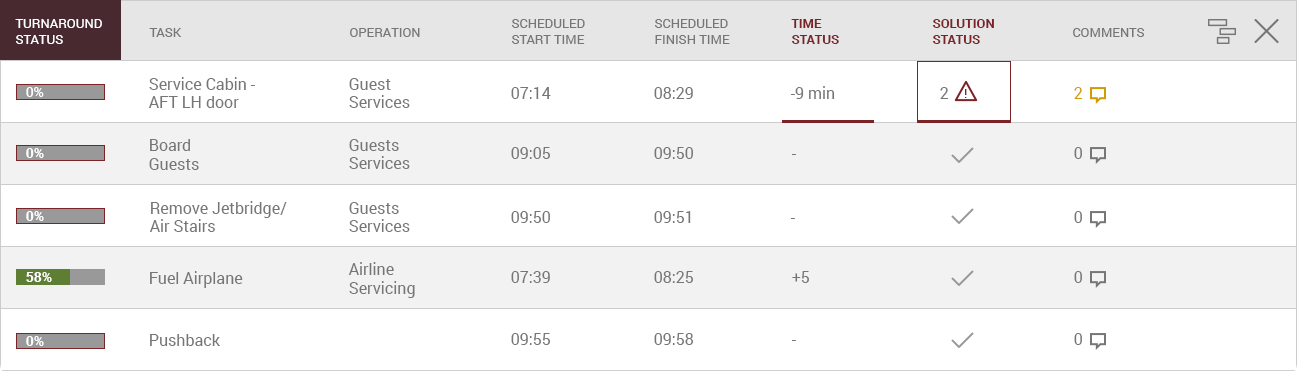
<style>
.page{position:relative;width:1297px;height:371px;background:#ffffff}
.page>*{position:absolute;margin:0}
.t1{font:13px "Roboto-Regular";color:#ffffff;text-transform:uppercase}
.t2{font:13px "Roboto-Regular";color:#767676;text-transform:uppercase}
.t3{font:13px "Roboto-Bold";color:#7b2326;text-transform:uppercase}
.t4{font:16px/18px "Roboto-Regular";color:#767676}
.t5{font:14px "Roboto-Medium";color:#fefefe}
.t6{font:16px "Roboto-Regular";color:#767676}
.t7{font:13.3px "Roboto-Regular";color:#7b2326}
.t8{font:16px "Roboto-Regular";color:#d09c04}
.t9{font:14px "Roboto-Bold";color:#fefefe}
</style>
<div class="page">
<p class="t1" style="left:15px;top:19px;width:87px;height:25px">Turnaround<br>status</p>
<p class="t2" style="left:149px;top:28px;width:33px;height:9px">Task</p>
<p class="t2" style="left:350px;top:28px;width:70px;height:9px">Operation</p>
<p class="t2" style="left:512px;top:19px;width:73px;height:25px">Scheduled<br>Start Time</p>
<p class="t2" style="left:655px;top:19px;width:75px;height:25px">Scheduled<br>Finish Time</p>
<p class="t3" style="left:791px;top:19px;width:48px;height:25px">Time<br>status</p>
<p class="t3" style="left:933px;top:19px;width:61px;height:25px">Solution<br>Status</p>
<p class="t2" style="left:1073px;top:28px;width:71px;height:9px">Comments</p>
<p class="t4" style="left:148px;top:77px;width:107px;height:31px">Service Cabin -<br>AFT LH door</p>
<p class="t4" style="left:349px;top:78px;width:61px;height:30px">Guest<br>Services</p>
<p class="t5" style="left:26px;top:87px;width:18px;height:10px">0%</p>
<p class="t6" style="left:511px;top:87px;width:40px;height:12px">07:14</p>
<p class="t6" style="left:654px;top:87px;width:39px;height:12px">08:29</p>
<p class="t6" style="left:790px;top:86px;width:45px;height:13px">-9 min</p>
<p class="t6" style="left:940px;top:87px;width:9px;height:12px">2</p>
<p class="t7" style="left:965px;top:89px;width:2px;height:9px">!</p>
<p class="t8" style="left:1074px;top:87px;width:9px;height:12px">2</p>
<p class="t9" style="left:26px;top:148px;width:18px;height:10px">0%</p>
<p class="t6" style="left:149px;top:139px;width:50px;height:31px">Board<br>Guests</p>
<p class="t4" style="left:349px;top:139px;width:61px;height:30px">Guests<br>Services</p>
<p class="t6" style="left:511px;top:147px;width:39px;height:12px">09:05</p>
<p class="t6" style="left:654px;top:147px;width:39px;height:12px">09:50</p>
<p class="t6" style="left:1074px;top:147px;width:8px;height:12px">0</p>
<p class="t6" style="left:791px;top:154px;width:5px;height:1px">-</p>
<p class="t4" style="left:149px;top:201px;width:138px;height:31px">Remove Jetbridge/<br>Air Stairs</p>
<p class="t4" style="left:349px;top:202px;width:61px;height:30px">Guests<br>Services</p>
<p class="t9" style="left:26px;top:211px;width:18px;height:10px">0%</p>
<p class="t6" style="left:511px;top:211px;width:39px;height:12px">09:50</p>
<p class="t6" style="left:654px;top:211px;width:37px;height:12px">09:51</p>
<p class="t6" style="left:790px;top:218px;width:5px;height:1px">-</p>
<p class="t6" style="left:1074px;top:211px;width:8px;height:12px">0</p>
<p class="t6" style="left:348px;top:262px;width:67px;height:36px">Airline<br>Servicing</p>
<p class="t9" style="left:26px;top:272px;width:26px;height:10px">58%</p>
<p class="t6" style="left:150px;top:271px;width:93px;height:17px">Fuel Airplane</p>
<p class="t6" style="left:511px;top:271px;width:39px;height:12px">07:39</p>
<p class="t6" style="left:654px;top:271px;width:39px;height:12px">08:25</p>
<p class="t6" style="left:792px;top:271px;width:17px;height:12px">+5</p>
<p class="t6" style="left:1074px;top:271px;width:8px;height:12px">0</p>
<p class="t9" style="left:26px;top:336px;width:18px;height:10px">0%</p>
<p class="t6" style="left:150px;top:334px;width:70px;height:12px">Pushback</p>
<p class="t6" style="left:511px;top:333px;width:39px;height:12px">09:55</p>
<p class="t6" style="left:654px;top:333px;width:40px;height:12px">09:58</p>
<p class="t6" style="left:791px;top:340px;width:5px;height:1px">-</p>
<p class="t6" style="left:1074px;top:333px;width:8px;height:12px">0</p>
</div>
